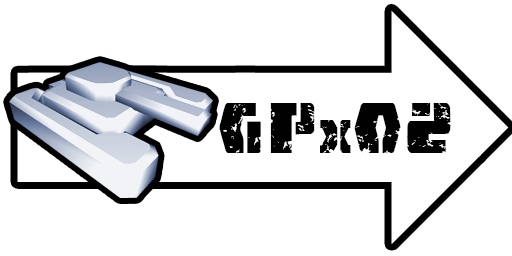
<style>
.page{position:relative;width:512px;height:256px;background:#ffffff}
.page>*{position:absolute;margin:0}
.t1{font:72px "FireFightBB";letter-spacing:0.015em;color:#010101}
.t2{font:48px "FireFightBB";letter-spacing:0.015em;color:#010101}
</style>
<div class="page">
<p class="t1" style="left:219px;top:103px;width:232px;height:50px">GP<span class="t2">x</span>02</p>
</div>
